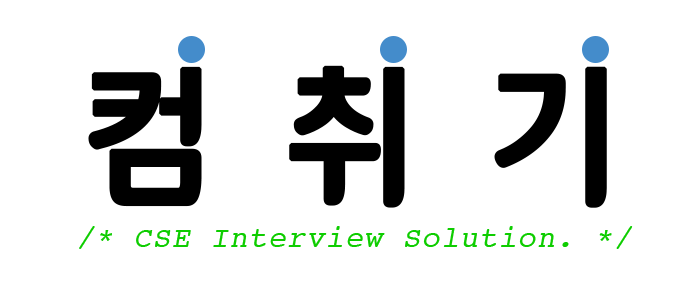
<style>
.page{position:relative;width:700px;height:300px;background:#ffffff}
.page>*{position:absolute;margin:0}
.t1{font:153px "12LotteMartDreamBold";letter-spacing:0.4em;color:#000000;font-weight:bold}
.t2{font:30px "Courier";letter-spacing:0.04em;color:#0ecd00;font-style:italic}
</style>
<div class="page">
<p class="t1" style="left:88px;top:65px;width:519px;height:143px">컴취기</p>
<p class="t2" style="left:79px;top:226px;width:554px;height:23px">/* CSE Interview Solution. */</p>
</div>
